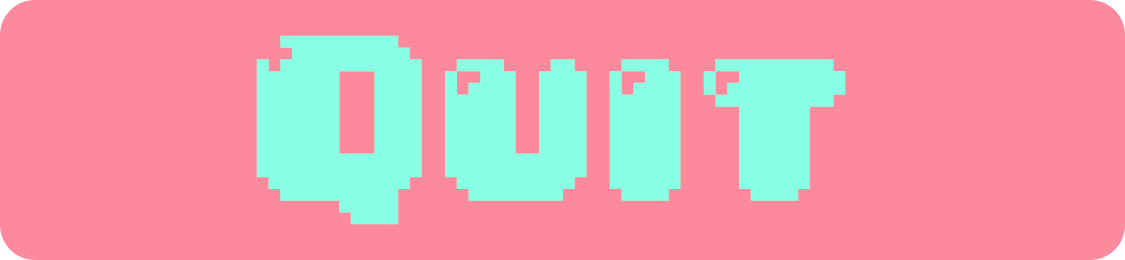
<style>
.page{position:relative;width:1125px;height:260px;background:#fd899d}
.page>*{position:absolute;margin:0}
.t1{font:200px "04b30";color:#88ffe4}
</style>
<div class="page">
<p class="t1" style="left:256px;top:35px;width:590px;height:190px">Quit</p>
</div>
